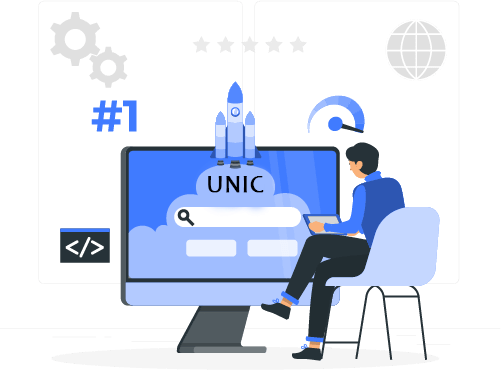
<style>
.page{position:relative;width:501px;height:370px;background:#ffffff}
.page>*{position:absolute;margin:0}
.t1{font:25.3px "Candara";color:#030303;font-weight:bold}
</style>
<div class="page">
<p class="t1" style="left:208px;top:176px;width:56px;height:17px">UNIC</p>
</div>
